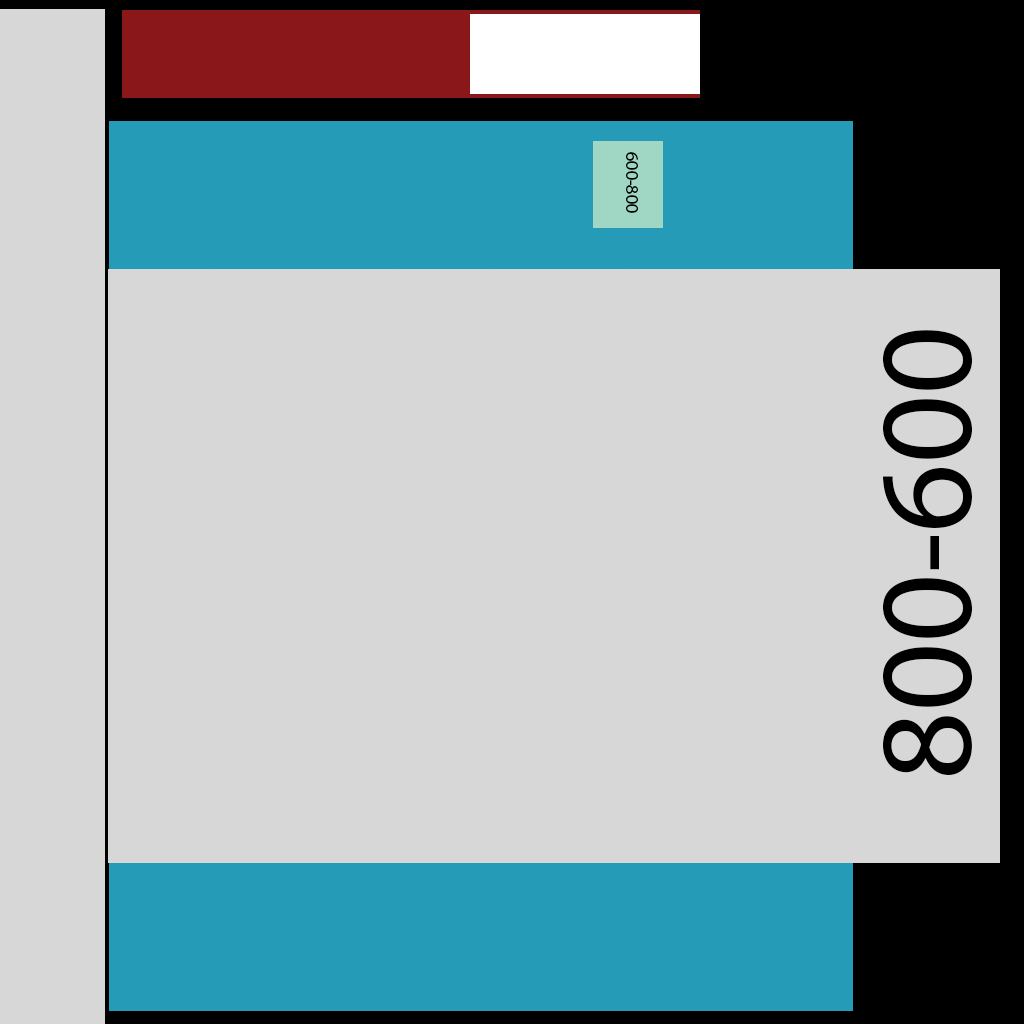
<style>
.page{position:relative;width:1024px;height:1024px;background:#d7d7d7}
.page>*{position:absolute;margin:0}
.t1{font:18px "MyriadPro-Regular";color:#000000}
.t2{font:134.3px "MyriadPro-Regular";color:#000000}
</style>
<div class="page">
<p class="t1" style="left:626px;top:152px;width:12px;height:61px;rotate:90deg">600-800</p>
<p class="t2" style="left:883px;top:330px;width:89px;height:445px;rotate:-90deg">800-600</p>
</div>
